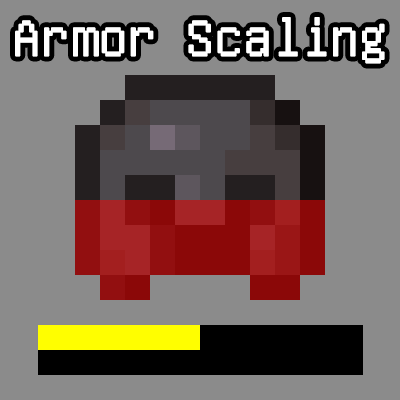
<style>
.page{position:relative;width:400px;height:400px;background:#8b8b8b}
.page>*{position:absolute;margin:0}
.t1{font:55.2px "Unifont";letter-spacing:-0.4em;color:#ffffff;font-weight:bold}
</style>
<div class="page">
<p class="t1" style="left:15px;top:17px;width:370px;height:47px">Armor Scaling</p>
</div>
